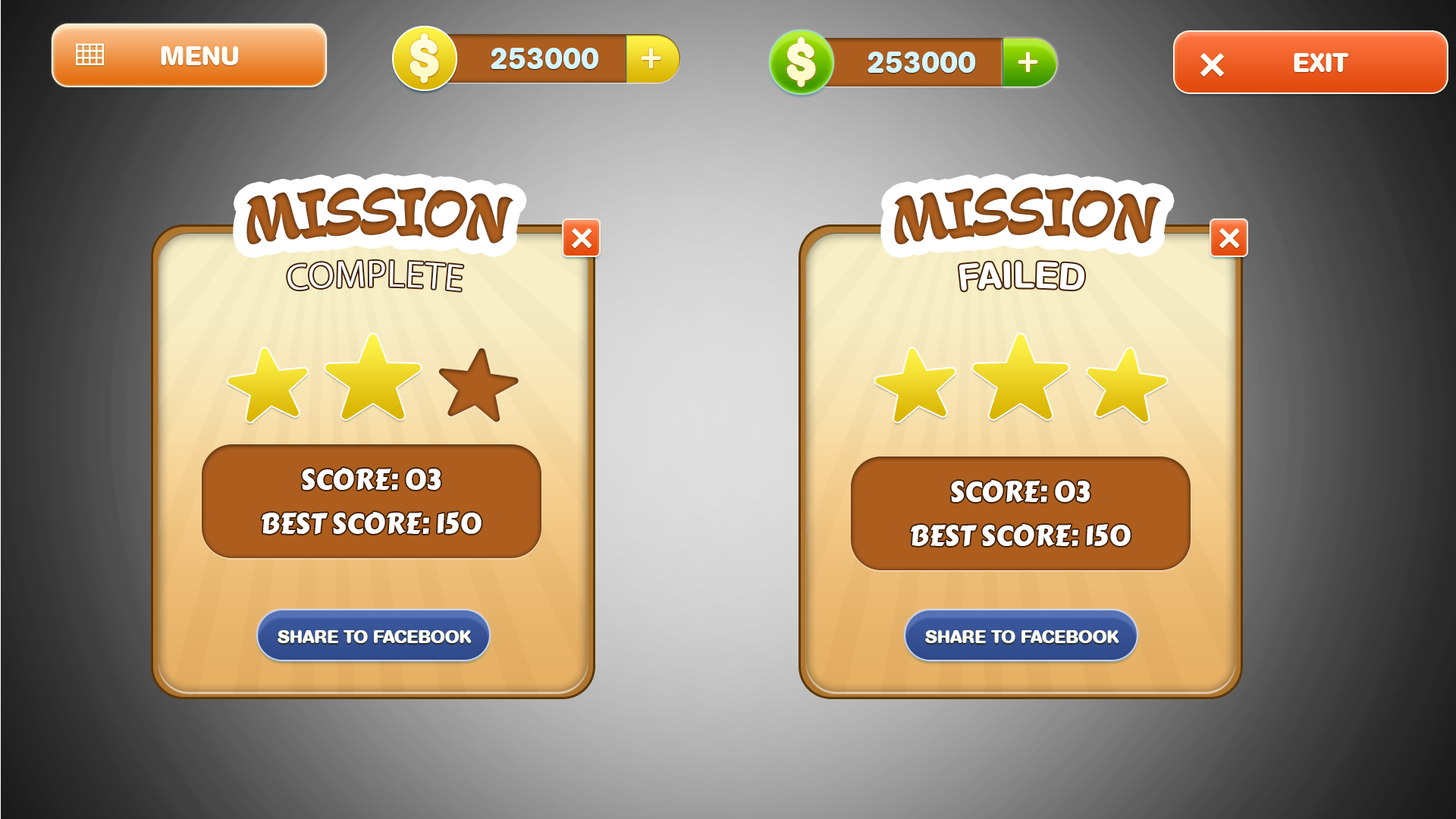
<style>
.page{position:relative;width:1456px;height:819px}
.page>*{position:absolute;margin:0}
.t1{font:26.5px "AGBookRounded-Bold";color:#fdfdf3;text-transform:uppercase}
.t2{font:30.3px "AGBookRounded-Bold";color:#d4f5ff;text-transform:uppercase}
.t3{font:68.2px "GeckoPersonalUseOnly";color:#99531b;text-transform:uppercase}
.t4{font:37.9px "MyriadPro-Regular";color:#ffffff;text-transform:uppercase}
.t5{font:37.9px "AGBookRounded-Medium";color:#ffffff;text-transform:uppercase}
.t6{font:28.1px/10.6px "CarterOne";color:#ffffff;text-transform:uppercase}
.t7{font:28.1px "CarterOne";color:#ffffff;text-transform:uppercase}
.t8{font:18.2px "AGBookRounded-Bold";color:#fdfdf3;text-transform:uppercase}
</style>
<div class="page">
<p class="t1" style="left:161px;top:46px;width:78px;height:19px">MENU</p>
<p class="t2" style="left:491px;top:48px;width:108px;height:21px">253000</p>
<p class="t2" style="left:868px;top:52px;width:108px;height:21px">253000</p>
<p class="t1" style="left:1294px;top:53px;width:55px;height:19px">EXIT</p>
<p class="t3" style="left:246px;top:187px;width:267px;height:58px">mission</p>
<p class="t3" style="left:894px;top:187px;width:267px;height:58px">mission</p>
<p class="t4" style="left:287px;top:260px;width:176px;height:31px">complete</p>
<p class="t5" style="left:959px;top:261px;width:126px;height:30px">failed</p>
<p class="t6" style="left:262px;top:468px;width:220px;height:67px;text-align:center"><span class="t7">SCORE: 03<br><br></span>BEST SCORE: 150</p>
<p class="t6" style="left:911px;top:480px;width:220px;height:67px;text-align:center"><span class="t7">SCORE: 03<br><br></span>BEST SCORE: 150</p>
<p class="t8" style="left:278px;top:630px;width:194px;height:13px">SHARE TO FACEBOOK</p>
<p class="t8" style="left:925px;top:630px;width:194px;height:13px">SHARE TO FACEBOOK</p>
</div>
